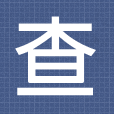
<style>
.page{position:relative;width:114px;height:114px;background:#ffffff}
.page>*{position:absolute;margin:0}
.t1{font:86.8px "AdobeFanHeitiStd-Bold";color:#ffffff}
</style>
<div class="page">
<p class="t1" style="left:15px;top:16px;width:81px;height:80px">查</p>
</div>
